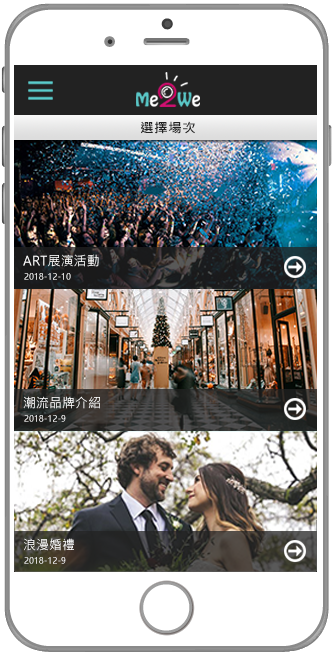
<style>
.page{position:relative;width:333px;height:655px;background:#ffffff}
.page>*{position:absolute;margin:0}
.t1{font:13px "MicrosoftJhengHeiUIBold";letter-spacing:0.025em;color:#222222;scale:1.05 1}
.t2{font:13px "MicrosoftJhengHeiUIRegular";letter-spacing:0.025em;color:#ffffff}
.t3{font:8.7px "MicrosoftJhengHeiUIRegular";letter-spacing:0.025em;scale:0.94 1}
</style>
<div class="page">
<p class="t1" style="left:141px;top:121px;width:54px;height:13px">選擇場次</p>
<p class="t2" style="left:23px;top:254px;width:76px;height:13px">ART展演活動</p>
<p class="t3" style="left:24px;top:273px;width:47px;height:7px">2018-12-10</p>
<p class="t2" style="left:23px;top:396px;width:77px;height:13px">潮流品牌介紹</p>
<p class="t3" style="left:24px;top:415px;width:42px;height:7px">2018-12-9</p>
<p class="t2" style="left:24px;top:538px;width:50px;height:13px">浪漫婚禮</p>
<p class="t3" style="left:24px;top:557px;width:42px;height:7px">2018-12-9</p>
</div>
